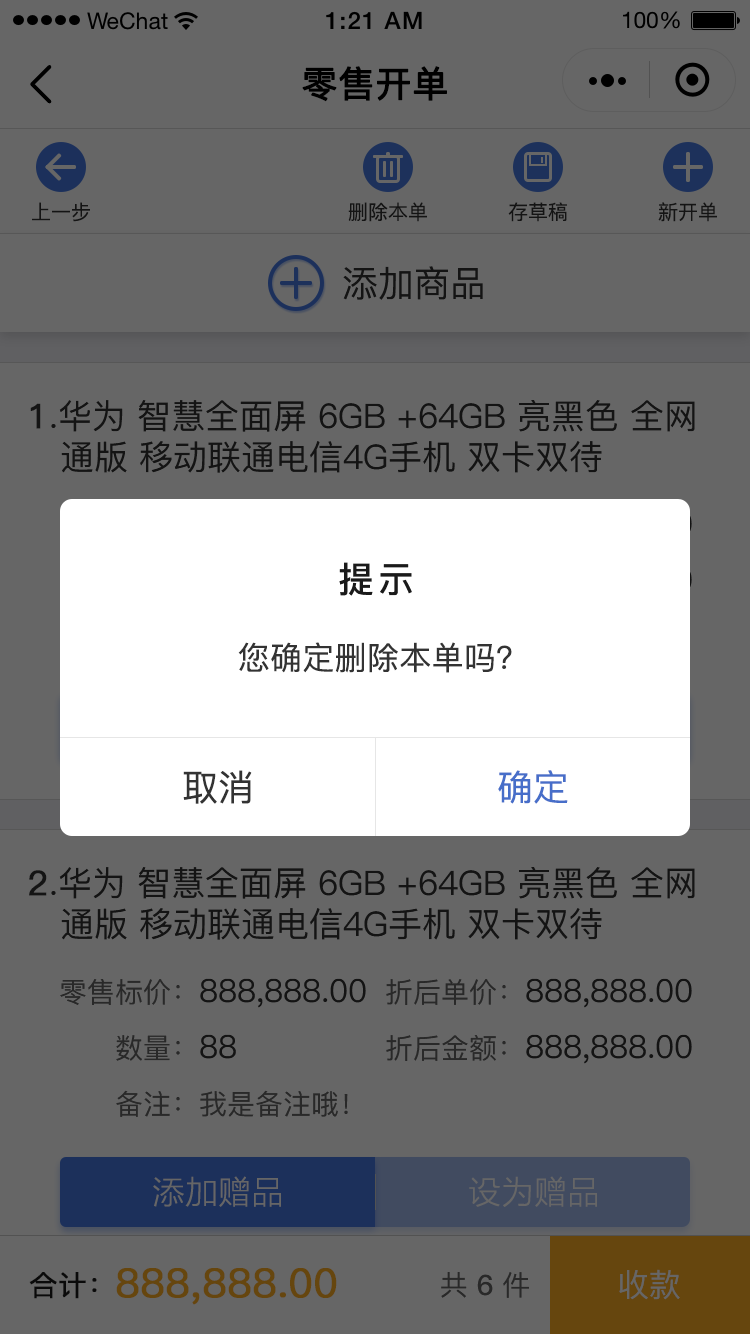
<style>
.page{position:relative;width:750px;height:1334px;background:#666666}
.page>*{position:absolute;margin:0}
.t1{font:36px "PingFang-SC-Medium";color:#000000;font-weight:bold}
.t2{font:20px "PingFang-SC-Medium";color:#141414}
.t3{font:36px "PingFang-SC-Medium";color:#141414}
.t4{font:34px "PingFang-SC-Medium";color:#141414}
.t5{font:34px "PingFang-SC-Medium";color:#141414;font-weight:bold}
.t6{font:36px "PingFang-SC-Bold";letter-spacing:0.1em;color:#1a1a1a}
.t7{font:32px "PingFang-SC-Medium";letter-spacing:0.01em;color:#333333}
.t8{font:36px "PingFang-SC-Medium";color:#333333}
.t9{font:36px "PingFang-SC-Medium";color:#476ec9}
.t10{font:32px "PingFang-SC-Medium"}
.t11{font:28px "PingFang-SC-Medium"}
.t12{font:28px "PingFang-SC-Medium";color:#666666}
.t13{font:32px "PingFang-SC-Medium";color:#333333}
.t14{font:28px "PingFang-SC-Medium";color:#292929}
.t15{font:32px "STHeitiSC-Medium";color:#666666}
.t16{font:28px "PingFang-SC-Medium";color:#1a1a1a;font-weight:bold}
.t17{font:40px "PingFang-SC-Medium";color:#66460e;font-weight:bold}
.t18{font:28px "PingFang-SC-Bold";color:#292929}
.t19{font:32px "PingFang-SC-Medium";color:#666666}
</style>
<div class="page">
<p class="t1" style="left:302px;top:66px;width:145px;height:36px">零售开单</p>
<p class="t2" style="left:32px;top:202px;width:58px;height:20px">上一步</p>
<p class="t2" style="left:348px;top:202px;width:79px;height:20px">删除本单</p>
<p class="t2" style="left:508px;top:202px;width:59px;height:20px">存草稿</p>
<p class="t2" style="left:658px;top:202px;width:59px;height:20px">新开单</p>
<p class="t3" style="left:343px;top:266px;width:140px;height:34px">添加商品</p>
<p class="t4" style="left:30px;top:400px;width:665px;height:73px"><span class="t5">1</span>.华为 智慧全面屏 6GB +64GB 亮黑色 全网<br>   通版 移动联通电信4G手机 双卡双待</p>
<p class="t6" style="left:339px;top:562px;width:73px;height:34px">提示</p>
<p class="t7" style="left:238px;top:642px;width:274px;height:31px">您确定删除本单吗？</p>
<p class="t8" style="left:183px;top:770px;width:69px;height:34px">取消</p>
<p class="t9" style="left:498px;top:770px;width:70px;height:34px">确定</p>
<p class="t4" style="left:29px;top:867px;width:666px;height:73px"><span class="t5">2</span>.华为 智慧全面屏 6GB +64GB 亮黑色 全网<br>   通版 移动联通电信4G手机 双卡双待</p>
<p class="t10" style="left:60px;top:978px;width:306px;height:30px"><span class="t11">零售标价：</span>888,888.00</p>
<p class="t10" style="left:386px;top:978px;width:306px;height:30px"><span class="t11">折后单价：</span>888,888.00</p>
<p class="t12" style="left:116px;top:1034px;width:120px;height:27px">数量：<span class="t13">88</span></p>
<p class="t10" style="left:386px;top:1034px;width:306px;height:30px"><span class="t11">折后金额：</span>888,888.00</p>
<p class="t14" style="left:116px;top:1090px;width:232px;height:27px">备注：我是备注哦！</p>
<p class="t15" style="left:153px;top:1176px;width:128px;height:31px">添加赠品</p>
<p class="t15" style="left:469px;top:1176px;width:128px;height:31px">设为赠品</p>
<p class="t16" style="left:29px;top:1272px;width:68px;height:27px">合计：</p>
<p class="t17" style="left:116px;top:1268px;width:221px;height:37px">888,888.00</p>
<p class="t14" style="left:441px;top:1272px;width:88px;height:26px">共 <span class="t18">6</span> 件</p>
<p class="t19" style="left:619px;top:1269px;width:61px;height:31px">收款</p>
</div>
